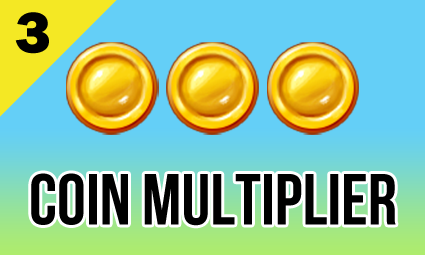
<style>
.page{position:relative;width:425px;height:255px;background:#64cff7}
.page>*{position:absolute;margin:0}
.t1{font:60px "FranklinGothic-Heavy";color:#000000}
.t2{font:72px "BebasNeueBold";color:#000000}
</style>
<div class="page">
<p class="t1" style="left:15px;top:12px;width:34px;height:42px">3</p>
<p class="t2" style="left:31px;top:173px;width:365px;height:53px">COIN MULTIPLIER</p>
</div>
